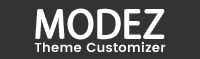
<style>
.page{position:relative;width:200px;height:59px;background:#333333}
.page>*{position:absolute;margin:0}
.t1{font:36.7px "KozGoPr6N-Regular";letter-spacing:0.03em;color:#ffffff;text-transform:uppercase}
.t2{font:36.7px "KozGoPr6N-Regular";letter-spacing:0.02em;color:#ffffff;text-transform:uppercase}
.t3{font:36.7px "KozGoPr6N-Regular";letter-spacing:0.06em;color:#ffffff;text-transform:uppercase}
.t4{font:13px "Poppins-SemiBold";letter-spacing:0.025em;color:#ffffff}
</style>
<div class="page">
<p class="t1" style="left:36px;top:9px;width:128px;height:30px">mo<span class="t2">d</span><span class="t3">e</span>z</p>
<p class="t4" style="left:34px;top:41px;width:132px;height:11px">Theme Customizer</p>
</div>
